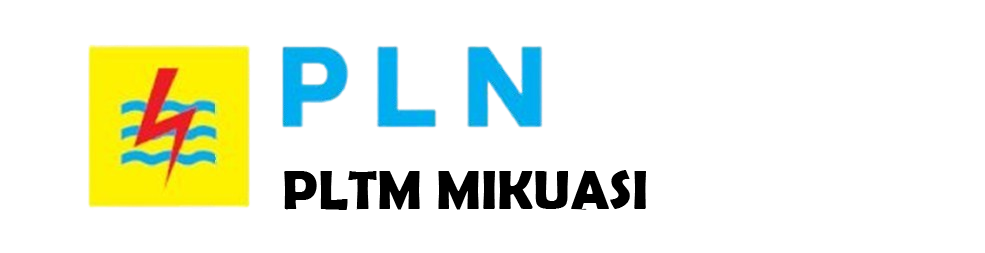
<style>
.page{position:relative;width:985px;height:253px;background:#ffffff}
.page>*{position:absolute;margin:0}
.t1{font:55px "BerlinSansFBDemi-Bold";color:#000000}
</style>
<div class="page">
<p class="t1" style="left:284px;top:170px;width:362px;height:40px">PLTM MIKUASI</p>
</div>
